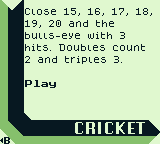
<style>
.page{position:relative;width:160px;height:144px;background:#e0f8cf}
.page>*{position:absolute;margin:0}
.t1{font:8px/12px "Dogica_Pixel";color:#071821}
.t2{font:8px "PressStart2P-Regular";color:#071821}
.t3{font:16px "Krungthep";color:#e0f8cf}
.t4{font:8px "PressStart2P-Regular";color:#071821;scale:0.87 1}
</style>
<div class="page">
<p class="t1" style="left:25px;top:8px;width:127px;height:56px">Close 15, 16, 17, 18, 19, 20 and the bulls-eye with 3 hits. Doubles count 2 and triples 3.</p>
<p class="t2" style="left:25px;top:80px;width:31px;height:8px">Play</p>
<p class="t3" style="left:75px;top:122px;width:70px;height:12px">CRICKET</p>
<p class="t4" style="left:4px;top:137px;width:6px;height:7px">B</p>
</div>
